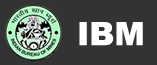
<style>
.page{position:relative;width:157px;height:65px;background:#333333}
.page>*{position:absolute;margin:0}
.t1{font:32.1px "Arial-Black";color:#ffffff}
</style>
<div class="page">
<p class="t1" style="left:79px;top:22px;width:64px;height:24px">IBM</p>
</div>
